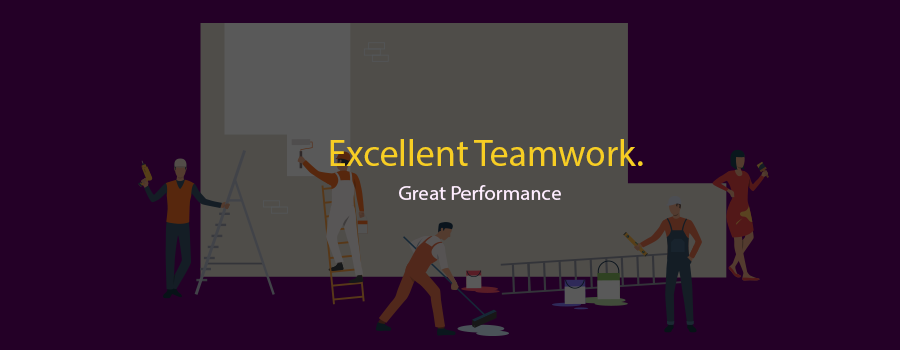
<style>
.page{position:relative;width:900px;height:350px;background:#240027}
.page>*{position:absolute;margin:0}
.t1{font:37.5px "MyriadPro-Regular";color:#f7ce23}
.t2{font:20.8px "MyriadPro-Regular";color:#ffeeff}
</style>
<div class="page">
<p class="t1" style="left:330px;top:139px;width:313px;height:27px">Excellent Teamwork.</p>
<p class="t2" style="left:399px;top:185px;width:162px;height:15px">Great Performance</p>
</div>
